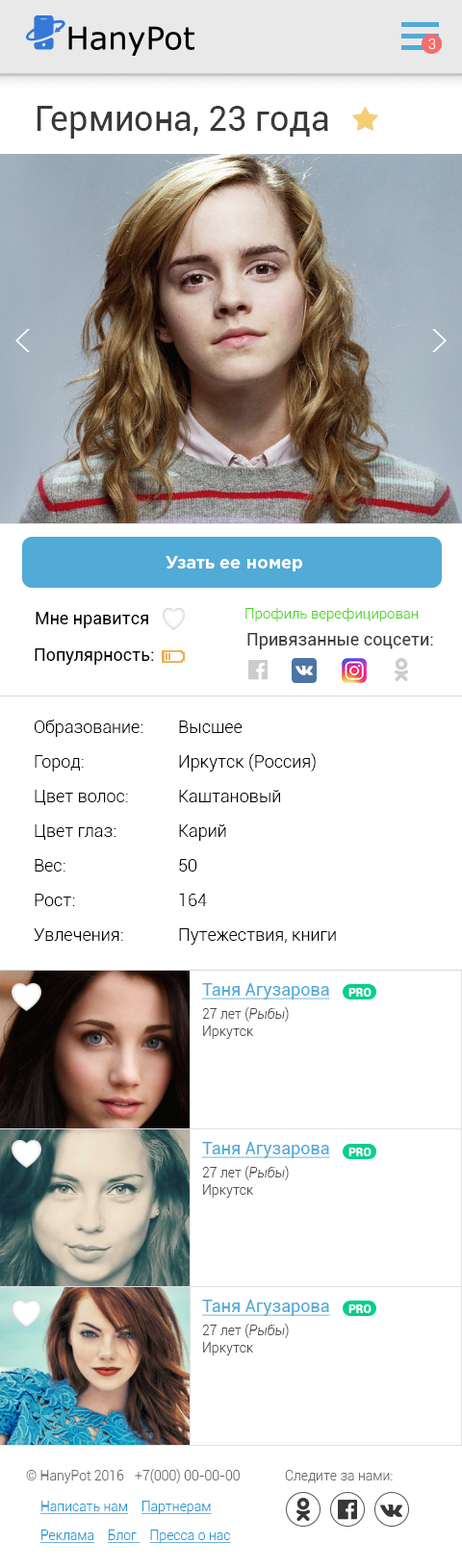
<style>
.page{position:relative;width:462px;height:1568px;background:#ffffff}
.page>*{position:absolute;margin:0}
.t1{font:13.5px "Roboto-Light";color:#ffffff}
.t2{font:34.6px "Roboto-Regular";color:#393939}
.t3{font:17.3px "GothamPro-Bold";color:#ffffff}
.t4{font:17.3px "Roboto-Regular";color:#000000}
.t5{font:14.4px "Roboto-Light";color:#43d311}
.t6{font:17.3px "Roboto-Regular";color:#393939}
.t7{font:17.3px/34.6px "Roboto-Light";color:#000000}
.t8{font:17.3px/23.1px "Roboto-Regular";color:#52aad7;text-decoration:underline}
.t9{font:13.5px/23.1px "Roboto-Light";color:#4c4c4c}
.t10{font:13.5px/23.1px "Roboto-LightItalic";color:#4c4c4c}
.t11{font:13.5px/17.3px "Roboto-Light";color:#4c4c4c}
.t12{font:11.5px "Roboto-Black";color:#ffffff;text-transform:uppercase}
.t13{font:13.5px "Roboto-Light";color:#696969}
.t14{font:13.5px/28.9px "Roboto-Light";color:#2196d1;text-decoration:underline}
.t15{font:13.5px "Roboto-Light";color:#2196d1;text-decoration:underline}
</style>
<div class="page">
<p class="t1" style="left:428px;top:38px;width:8px;height:11px">3</p>
<p class="t2" style="left:37px;top:106px;width:291px;height:33px">Гермиона, 23 года</p>
<p class="t3" style="left:165px;top:556px;width:137px;height:15px">Узать ее номер</p>
<p class="t4" style="left:36px;top:612px;width:112px;height:16px">Мне нравится</p>
<p class="t5" style="left:245px;top:608px;width:173px;height:13px">Профиль верефицирован</p>
<p class="t6" style="left:247px;top:633px;width:186px;height:16px">Привязанные соцсети:</p>
<p class="t4" style="left:35px;top:648px;width:119px;height:17px">Популярность:</p>
<p class="t7" style="left:34px;top:720px;width:108px;height:221px">Образование:<br>Город:<br>Цвет волос:<br>Цвет глаз:<br>Вес:<br>Рост:<br>Увлечения:</p>
<p class="t7" style="left:179px;top:721px;width:157px;height:224px">Высшее<br>Иркутск (Россия)<br>Каштановый<br>Карий<br>50<br>164<br>Путежествия, книги</p>
<p class="t8" style="left:202px;top:983px;width:128px;height:56px">Таня Агузарова<br><span class="t9">27 лет (</span><span class="t10">Рыбы</span><span class="t9">)<br></span><span class="t11">Иркутск</span></p>
<p class="t12" style="left:348px;top:988px;width:23px;height:9px">pro</p>
<p class="t8" style="left:202px;top:1142px;width:128px;height:56px">Таня Агузарова<br><span class="t9">27 лет (</span><span class="t10">Рыбы</span><span class="t9">)<br></span><span class="t11">Иркутск</span></p>
<p class="t12" style="left:348px;top:1148px;width:23px;height:8px">pro</p>
<p class="t8" style="left:202px;top:1300px;width:128px;height:55px">Таня Агузарова<br><span class="t9">27 лет (</span><span class="t10">Рыбы</span><span class="t9">)<br></span><span class="t11">Иркутск</span></p>
<p class="t12" style="left:348px;top:1304px;width:23px;height:9px">pro</p>
<p class="t13" style="left:26px;top:1470px;width:98px;height:13px">© HanyPot 2016</p>
<p class="t13" style="left:135px;top:1469px;width:105px;height:14px">+7(000) 00-00-00</p>
<p class="t13" style="left:285px;top:1470px;width:107px;height:13px">Следите за нами:</p>
<p class="t14" style="left:40px;top:1501px;width:191px;height:42px"><span class="t15">Написать нам    </span>Партнерам    <br>Реклама    Блог    Пресса о нас</p>
</div>
